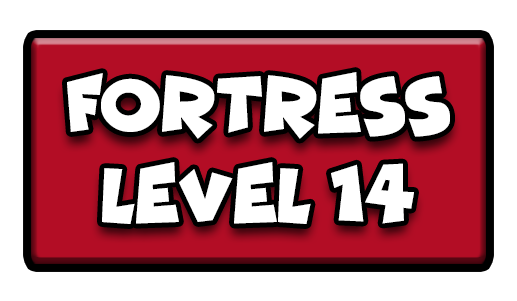
<style>
.page{position:relative;width:517px;height:301px;background:#ffffff}
.page>*{position:absolute;margin:0}
.t1{font:77.7px "Funhouse";color:#ffffff;scale:0.95 1}
</style>
<div class="page">
<p class="t1" style="left:67px;top:72px;width:383px;height:67px">FORTRESS</p>
<p class="t1" style="left:102px;top:162px;width:312px;height:62px">LEVEL 14</p>
</div>
